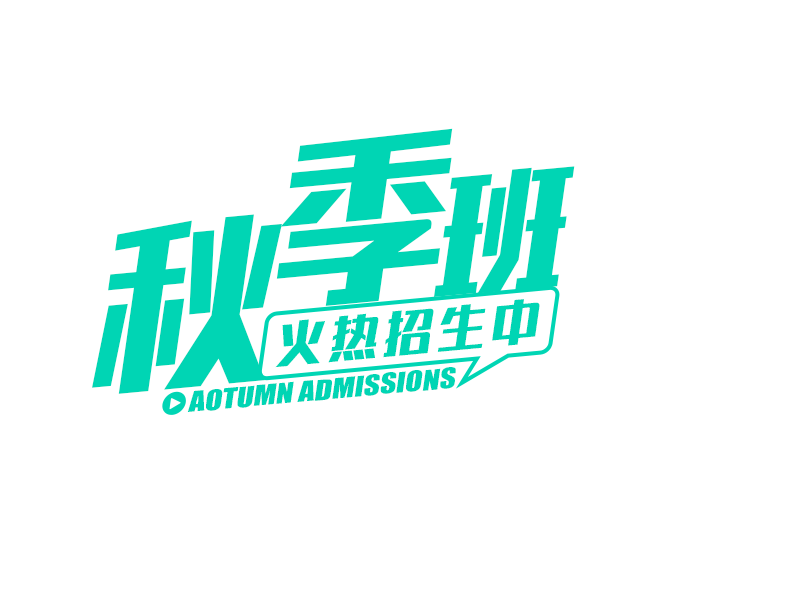
<style>
.page{position:relative;width:800px;height:600px;background:#ffffff}
.page>*{position:absolute;margin:0}
.t1{font:180.8px "RuixianSunHeiHeavyGB1.0";letter-spacing:-0.08em;color:#00d5b4}
.t2{font:134.4px "RuixianSunHeiHeavyGB1.0";letter-spacing:-0.08em;color:#00d5b4}
.t3{font:48.8px "RuixianSunHeiHeavyGB1.0";letter-spacing:0.1em;color:#00d5b4}
.t4{font:26.6px "Impact";color:#00d5b4;scale:1.19 1}
</style>
<div class="page">
<p class="t1" style="left:92px;top:128px;width:483px;height:266px;rotate:-5deg">秋季<span class="t2">班</span></p>
<p class="t3" style="left:275px;top:299px;width:265px;height:69px;rotate:-5deg">火热招生中</p>
<p class="t4" style="left:187px;top:367px;width:269px;height:45px;rotate:-5deg">AOTUMN ADMISSIONS</p>
</div>
